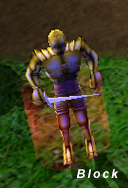
<style>
.page{position:relative;width:128px;height:188px}
.page>*{position:absolute;margin:0}
.t1{font:12px "Arial-BoldItalicMT";letter-spacing:0.18em;color:#ffffff}
</style>
<div class="page">
<p class="t1" style="left:76px;top:169px;width:43px;height:9px">Block</p>
</div>
